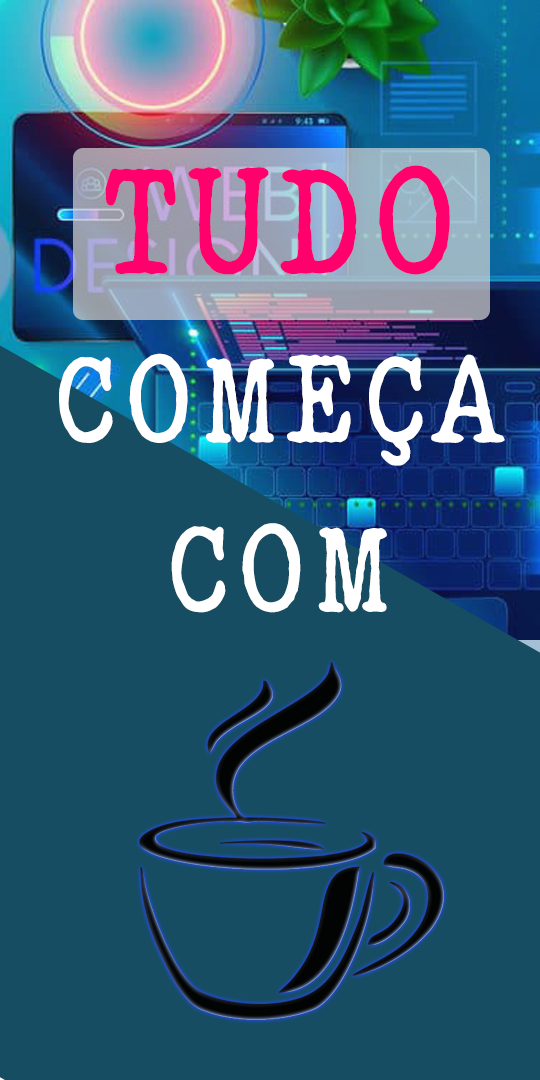
<style>
.page{position:relative;width:540px;height:1080px;background:#164d62}
.page>*{position:absolute;margin:0}
.t1{font:127px/169.3px "ELEGANTTYPEWRITER";color:#ffffff}
.t2{font:155.2px/169.3px "ELEGANTTYPEWRITER";color:#ff006c}
</style>
<div class="page">
<p class="t1" style="left:59px;top:165px;width:446px;height:448px;text-align:center"><span class="t2">TUDO<br></span>COMEÇA<br>COM</p>
</div>
